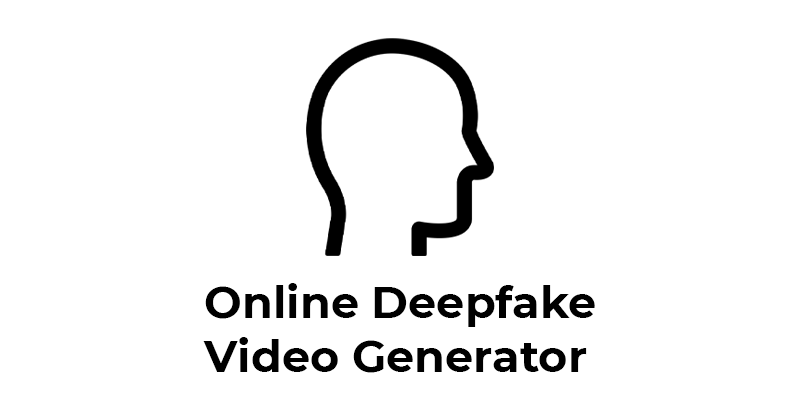
<style>
.page{position:relative;width:800px;height:420px;background:#ffffff}
.page>*{position:absolute;margin:0}
.t1{font:44.6px "Montserrat-Bold";color:#000000}
</style>
<div class="page">
<p class="t1" style="left:203px;top:283px;width:392px;height:90px">Online Deepfake<br>Video Generator</p>
</div>
